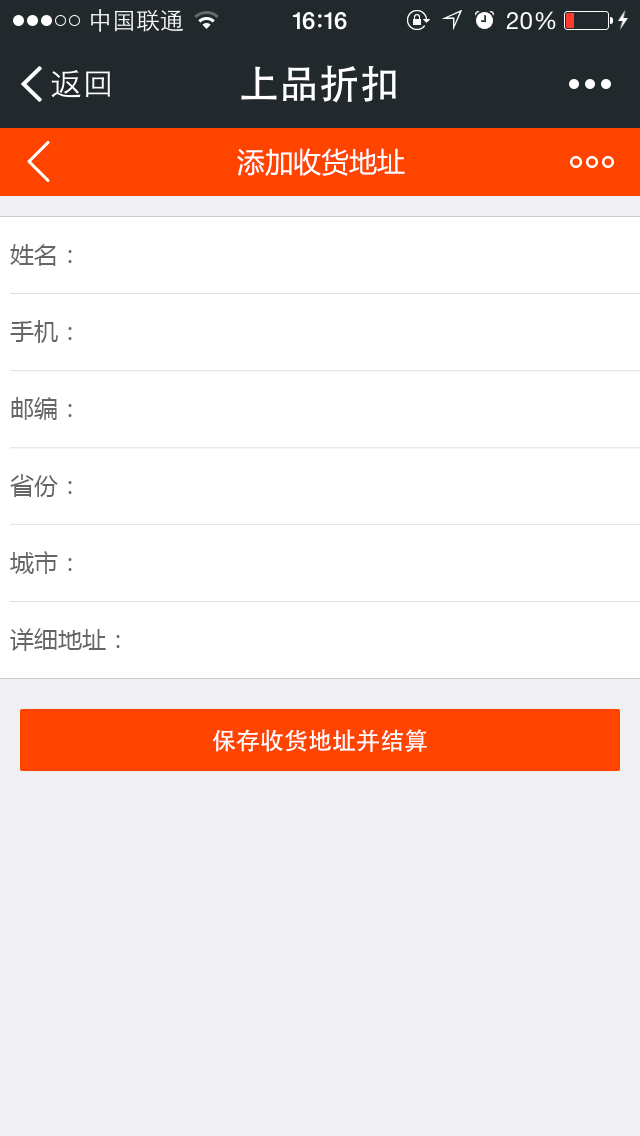
<style>
.page{position:relative;width:640px;height:1136px;background:#ffffff}
.page>*{position:absolute;margin:0}
.t1{font:28px "MicrosoftYaHei";color:#ffffff}
.t2{font:24px/77px "MicrosoftYaHei";color:#666666}
.t3{font:24px "STHeiti";color:#ffffff}
</style>
<div class="page">
<p class="t1" style="left:237px;top:148px;width:168px;height:28px">添加收货地址</p>
<p class="t2" style="left:10px;top:244px;width:110px;height:407px">姓名：<br>手机：<br>邮编：<br>省份：<br>城市：<br>详细地址：</p>
<p class="t3" style="left:213px;top:729px;width:214px;height:23px">保存收货地址并结算</p>
</div>
